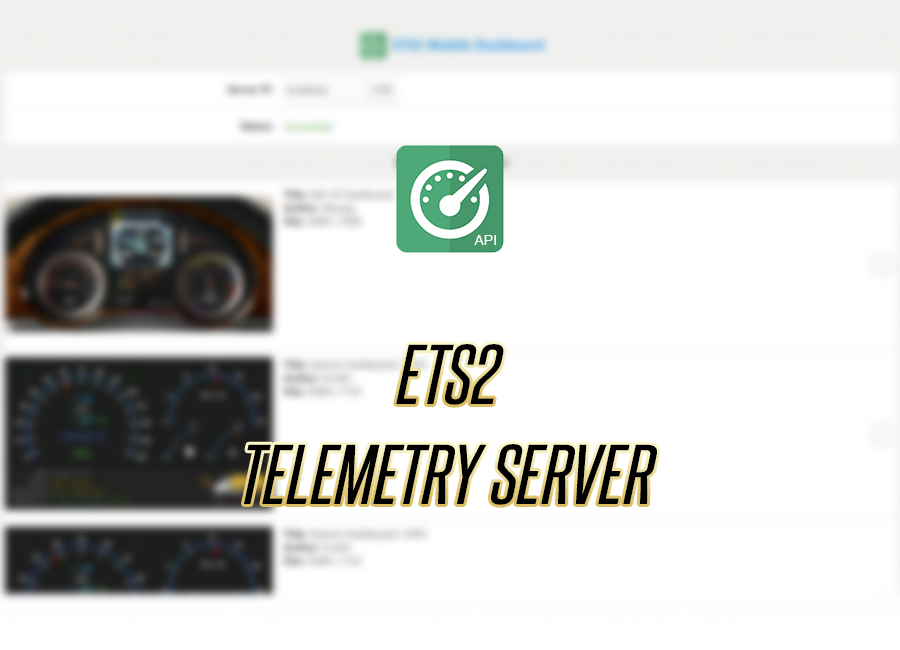
<style>
.page{position:relative;width:900px;height:650px;background:#ffffff}
.page>*{position:absolute;margin:0}
.t1{font:72px "SteelfishRg-Regular";color:#000000;font-style:italic;scale:1.2 1}
</style>
<div class="page">
<p class="t1" style="left:396px;top:344px;width:108px;height:61px">ETS2</p>
<p class="t1" style="left:244px;top:444px;width:413px;height:61px">TELEMETRY SERVER</p>
</div>
